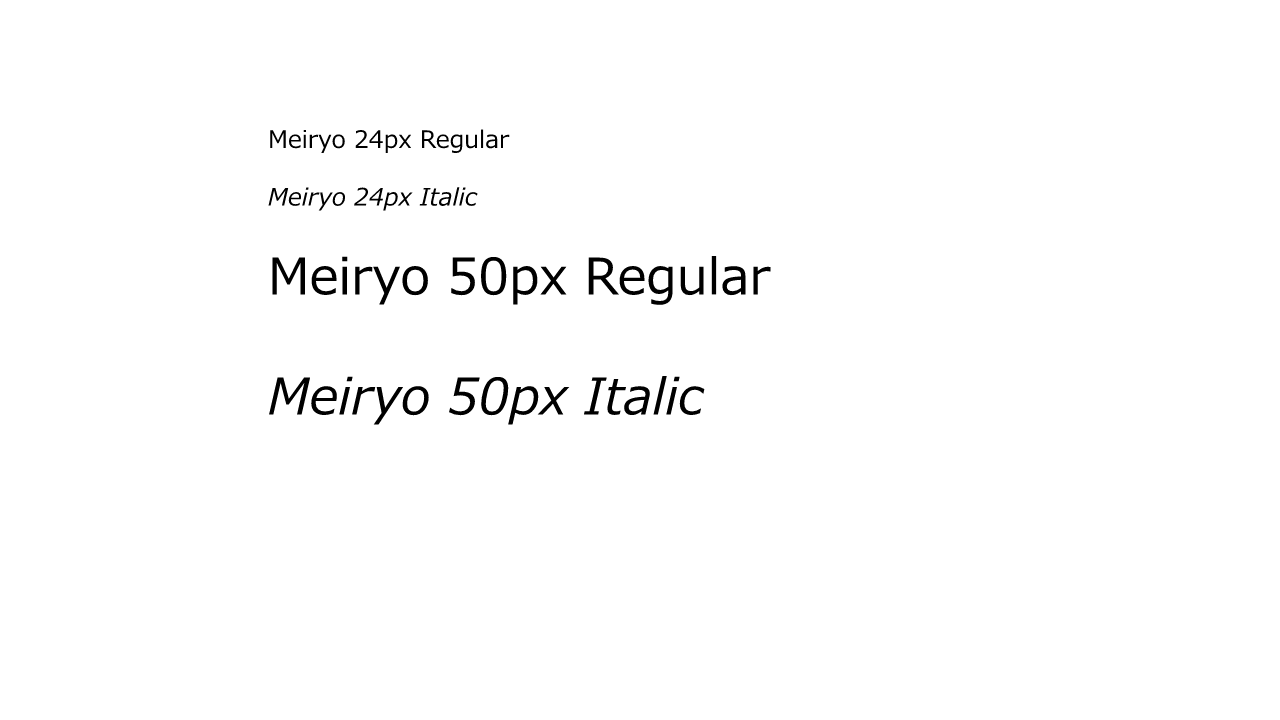
<style>
.page{position:relative;width:1280px;height:720px;background:#ffffff}
.page>*{position:absolute;margin:0}
.t1{font:24px "Meiryo";color:#000000}
.t2{font:24px "Meiryo-Italic";color:#000000}
.t3{font:50px "Meiryo";color:#000000}
.t4{font:50px "Meiryo-Italic";color:#000000}
</style>
<div class="page">
<p class="t1" style="left:268px;top:129px;width:503px;height:296px">Meiryo 24px Regular<br><br><span class="t2">Meiryo 24px Italic<br><br></span><span class="t3">Meiryo 50px Regular<br><br></span><span class="t4">Meiryo 50px Italic</span></p>
</div>
